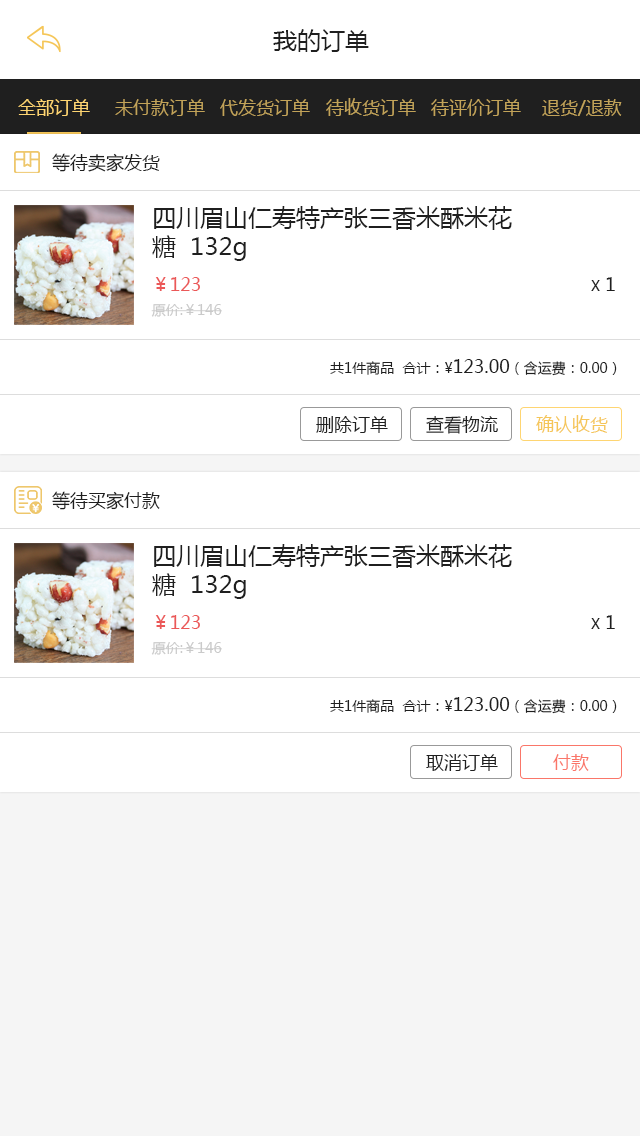
<style>
.page{position:relative;width:640px;height:1136px;background:#ffffff}
.page>*{position:absolute;margin:0}
.t1{font:24px "MicrosoftYaHei";color:#1f1f1f}
.t2{font:18px "MicrosoftYaHei";color:#fed572}
.t3{font:18px "MicrosoftYaHei";color:#c2a359}
.t4{font:18px "MicrosoftYaHei";color:#1f1f1f}
.t5{font:14px/24px "MicrosoftYaHei"}
.t6{font:18px/24px "MicrosoftYaHei"}
.t7{font:14px "MicrosoftYaHei";color:#1f1f1f}
.t8{font:18px "MicrosoftYaHei";color:#f5c658}
.t9{font:18px "MicrosoftYaHei";color:#fa7669}
</style>
<div class="page">
<p class="t1" style="left:273px;top:29px;width:96px;height:23px">我的订单</p>
<p class="t2" style="left:18px;top:99px;width:72px;height:17px">全部订单</p>
<p class="t3" style="left:115px;top:99px;width:90px;height:17px">未付款订单</p>
<p class="t3" style="left:220px;top:99px;width:90px;height:17px">代发货订单</p>
<p class="t3" style="left:326px;top:98px;width:90px;height:18px">待收货订单</p>
<p class="t3" style="left:431px;top:99px;width:90px;height:17px">待评价订单</p>
<p class="t3" style="left:542px;top:99px;width:80px;height:17px">退货/退款</p>
<p class="t4" style="left:52px;top:153px;width:108px;height:19px">等待卖家发货</p>
<p class="t1" style="left:152px;top:206px;width:360px;height:55px">四川眉山仁寿特产张三香米酥米花<br>糖  132g</p>
<p class="t5" style="left:151px;top:277px;width:71px;height:40px"><span class="t6">￥123  <br></span>原价:￥146</p>
<p class="t7" style="left:591px;top:277px;width:24px;height:14px">X<span class="t4"> 1</span></p>
<p class="t7" style="left:330px;top:359px;width:287px;height:17px">共1件商品  合计：¥<span class="t4">123.00</span>（含运费：0.00）</p>
<p class="t4" style="left:316px;top:416px;width:72px;height:17px">删除订单</p>
<p class="t4" style="left:426px;top:416px;width:72px;height:18px">查看物流</p>
<p class="t8" style="left:536px;top:415px;width:72px;height:18px">确认收货</p>
<p class="t4" style="left:52px;top:491px;width:108px;height:19px">等待买家付款</p>
<p class="t1" style="left:152px;top:544px;width:360px;height:55px">四川眉山仁寿特产张三香米酥米花<br>糖  132g</p>
<p class="t5" style="left:151px;top:615px;width:71px;height:40px"><span class="t6">￥123  <br></span>原价:￥146</p>
<p class="t7" style="left:591px;top:615px;width:24px;height:14px">X<span class="t4"> 1</span></p>
<p class="t7" style="left:330px;top:697px;width:287px;height:17px">共1件商品  合计：¥<span class="t4">123.00</span>（含运费：0.00）</p>
<p class="t4" style="left:426px;top:754px;width:72px;height:17px">取消订单</p>
<p class="t9" style="left:553px;top:754px;width:36px;height:17px">付款</p>
</div>
